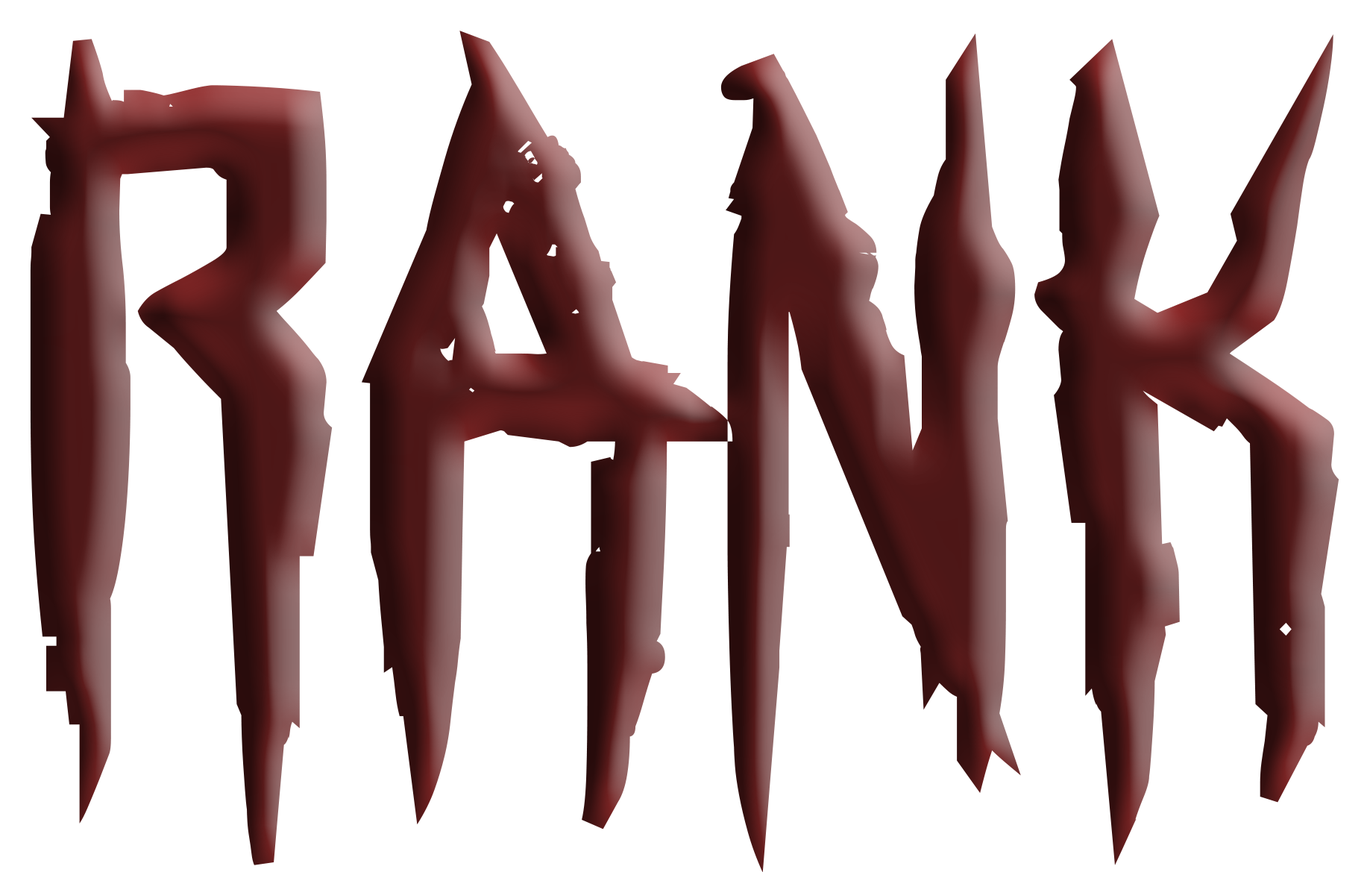
<style>
.page{position:relative;width:1367px;height:872px;background:#ffffff}
.page>*{position:absolute;margin:0}
.t1{font:925.3px "HorroroidBold"}
</style>
<div class="page">
<p class="t1" style="left:30px;top:31px;width:1310px;height:842px">RANK</p>
</div>
